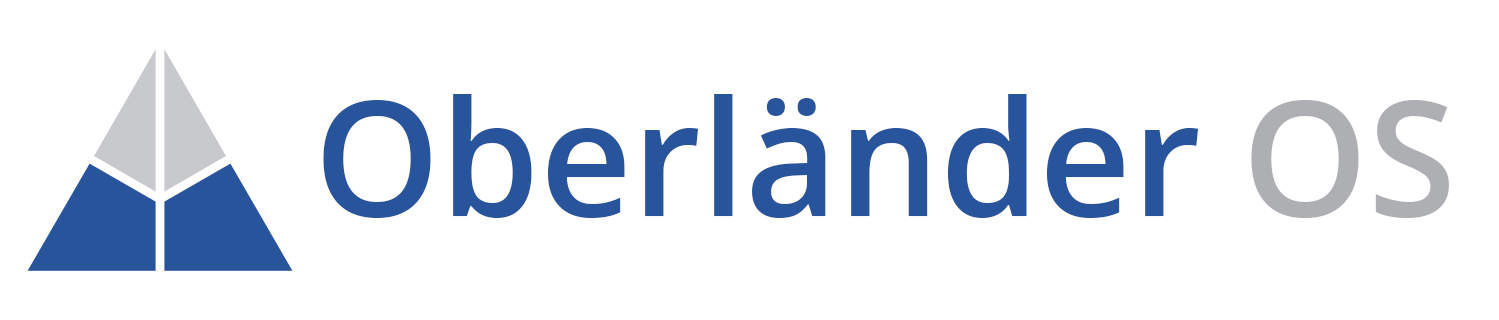
<style>
.page{position:relative;width:1499px;height:320px;background:#ffffff}
.page>*{position:absolute;margin:0}
.t1{font:160px "OpenSans-Semibold";color:#28549c}
.t2{font:160px "OpenSans-Semibold";color:#adafb3}
</style>
<div class="page">
<p class="t1" style="left:323px;top:94px;width:1126px;height:124px">Oberländer <span class="t2">OS</span></p>
</div>
